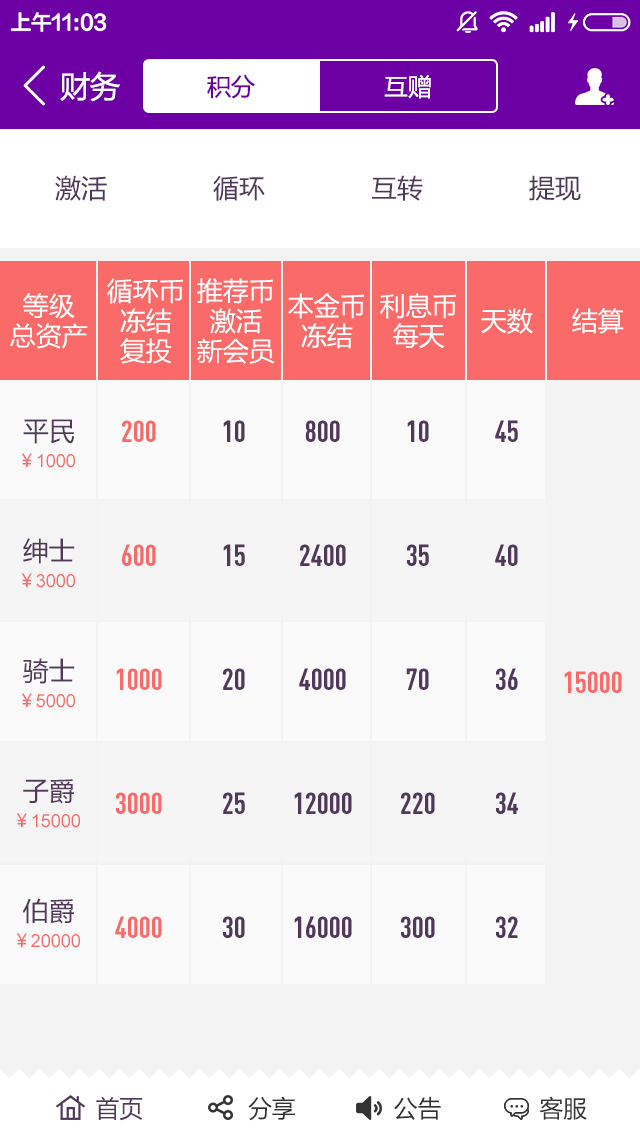
<style>
.page{position:relative;width:640px;height:1136px;background:#fafafa}
.page>*{position:absolute;margin:0}
.t1{font:30px "MicrosoftYaHei";color:#ffffff}
.t2{font:24px "MicrosoftYaHei";color:#6d00a5}
.t3{font:24px "MicrosoftYaHei";color:#ffffff}
.t4{font:26px "MicrosoftYaHei";color:#50385b}
.t5{font:26px/30px "MicrosoftYaHei";color:#ffffff}
.t6{font:26px "MicrosoftYaHei";color:#ffffff}
.t7{font:26px/60px "MicrosoftYaHei";color:#50385b}
.t8{font:30px/62px "DINCond-Bold";color:#f96a69}
.t9{font:30px/62px "DINCond-Bold";color:#50385b}
.t10{font:18px/60px "ArialMT";color:#f96a69}
.t11{font:18px/60px "MicrosoftYaHei";color:#f96a69}
.t12{font:30px "DINCond-Bold";color:#f96a69}
.t13{font:24px "MicrosoftYaHei";color:#333333}
.t14{font:24px "MicrosoftYaHei";color:#50385b}
</style>
<div class="page">
<p class="t1" style="left:60px;top:71px;width:60px;height:31px">财务</p>
<p class="t2" style="left:207px;top:74px;width:48px;height:25px">积分</p>
<p class="t3" style="left:384px;top:75px;width:47px;height:24px">互赠</p>
<p class="t4" style="left:55px;top:175px;width:52px;height:26px">激活</p>
<p class="t4" style="left:213px;top:175px;width:52px;height:26px">循环</p>
<p class="t4" style="left:372px;top:175px;width:51px;height:26px">互转</p>
<p class="t4" style="left:529px;top:175px;width:52px;height:26px">提现</p>
<p class="t5" style="left:107px;top:278px;width:76px;height:86px;text-align:center">循环币<br>冻结<br>复投</p>
<p class="t5" style="left:197px;top:278px;width:78px;height:86px;text-align:center">推荐币<br>激活<br>新会员</p>
<p class="t5" style="left:10px;top:293px;width:78px;height:56px;text-align:center">等级<br>总资产</p>
<p class="t5" style="left:288px;top:293px;width:76px;height:56px;text-align:center">本金币<br>冻结</p>
<p class="t5" style="left:380px;top:293px;width:76px;height:56px;text-align:center">利息币<br>每天</p>
<p class="t6" style="left:481px;top:308px;width:52px;height:26px">天数</p>
<p class="t6" style="left:572px;top:308px;width:52px;height:26px">结算</p>
<p class="t7" style="left:23px;top:419px;width:52px;height:505px">平民<br><br>绅士<br><br>骑士 <br><br>子爵<br><br>伯爵</p>
<p class="t8" style="left:115px;top:420px;width:47px;height:518px;text-align:center">200<br><br>600<br><br>1000<br><br>3000<br><br>4000</p>
<p class="t9" style="left:223px;top:420px;width:22px;height:518px;text-align:center">10<br><br>15<br><br>20<br><br>25<br><br>30</p>
<p class="t9" style="left:294px;top:420px;width:58px;height:518px;text-align:center">800<br><br>2400<br><br>4000<br><br>12000<br><br>16000</p>
<p class="t9" style="left:401px;top:420px;width:34px;height:518px;text-align:center">10<br><br>35<br><br>70<br><br>220<br><br>300</p>
<p class="t9" style="left:495px;top:420px;width:23px;height:518px;text-align:center">45<br><br>40<br><br>36<br><br>34<br><br>32</p>
<p class="t10" style="left:16px;top:453px;width:64px;height:495px;text-align:center"><span class="t11">￥</span>1000<br><br><span class="t11">￥</span>3000<br><br><span class="t11">￥</span>5000<br><br><span class="t11">￥</span>15000<br><span class="t11"><br>￥</span>20000</p>
<p class="t12" style="left:564px;top:671px;width:58px;height:22px">15000</p>
<p class="t13" style="left:96px;top:1096px;width:491px;height:25px"><span class="t14">首页</span>               分享              公告              客服</p>
</div>
